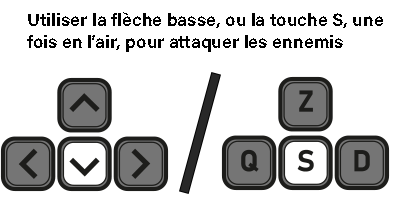
<style>
.page{position:relative;width:400px;height:200px;background:#ffffff}
.page>*{position:absolute;margin:0}
.t1{font:18px "AcuminConcept-Bold";color:#000000}
</style>
<div class="page">
<p class="t1" style="left:27px;top:12px;width:356px;height:40px">Utiliser la flèche basse, ou la touche S, une fois en l’air, pour attaquer les ennemis</p>
</div>
